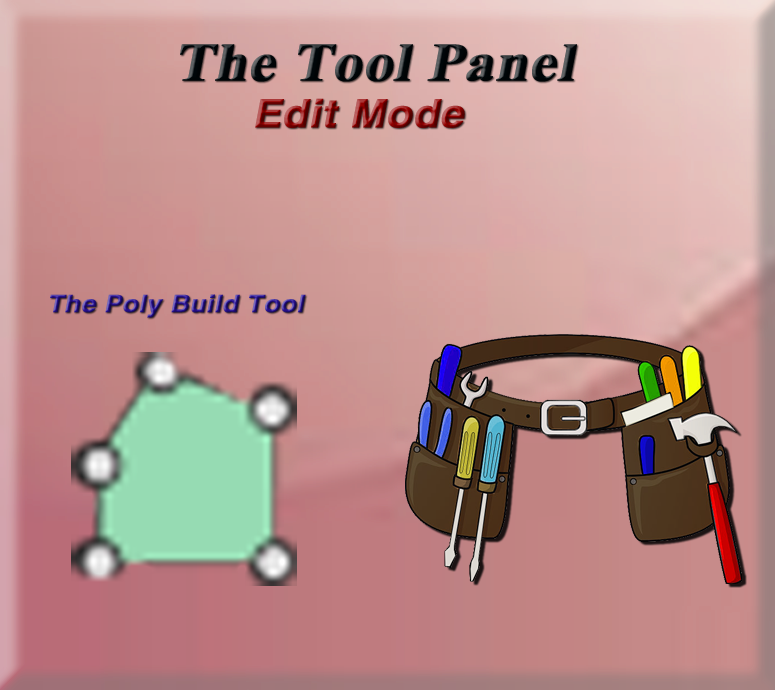
<style>
.page{position:relative;width:775px;height:690px}
.page>*{position:absolute;margin:0}
.t1{font:53.9px "TimesNewRomanPS-BoldMT";color:#000609;font-weight:bold;font-style:italic;scale:1.08 1}
.t2{font:39.1px "HelveticaLTStd-Bold";font-weight:bold;font-style:italic;scale:1.08 1}
.t3{font:53.9px "TimesNewRomanPS-BoldMT";font-weight:bold;font-style:italic;scale:1.08 1}
.t4{font:24.2px "HelveticaLTStd-Bold";font-weight:bold;font-style:italic;scale:1.08 1}
</style>
<div class="page">
<p class="t1" style="left:180px;top:44px;width:397px;height:38px">The Tool Panel</p>
<p class="t2" style="left:255px;top:98px;width:210px;height:30px"><span class="t3"> </span>Edit Mode</p>
<p class="t4" style="left:50px;top:294px;width:256px;height:24px">The Poly Build Tool</p>
</div>
